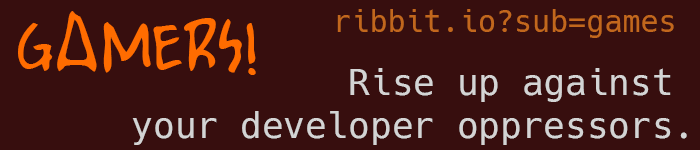
<style>
.page{position:relative;width:700px;height:150px;background:#370e0e}
.page>*{position:absolute;margin:0}
.t1{font:72px "Bobcat";color:#ff6c00}
.t2{font:30px "Hack-Regular";color:#c2671d}
.t3{font:36px "Hack-Regular";color:#d4d4d4}
</style>
<div class="page">
<p class="t1" style="left:18px;top:11px;width:238px;height:64px">GAMERS!</p>
<p class="t2" style="left:337px;top:9px;width:337px;height:29px">ribbit.io?sub=games</p>
<p class="t3" style="left:132px;top:68px;width:555px;height:77px;text-align:right">Rise up against <br>your developer oppressors.</p>
</div>
